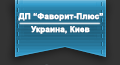
<style>
.page{position:relative;width:120px;height:65px}
.page>*{position:absolute;margin:0}
.t1{font:8px "Arial-BoldMT";color:#fffeff;font-weight:bold}
.t2{font:8px "Arial-BoldMT";color:#ffffff;font-weight:bold}
</style>
<div class="page">
<p class="t1" style="left:18px;top:13px;width:85px;height:8px">ДП “Фаворит-Плюс”</p>
<p class="t2" style="left:31px;top:26px;width:59px;height:8px">Украина, Киев</p>
</div>
